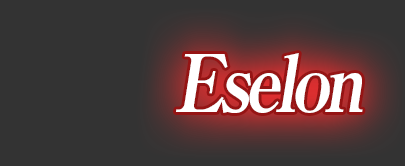
<style>
.page{position:relative;width:405px;height:166px;background:#333333}
.page>*{position:absolute;margin:0}
.t1{font:80px "RyuminPro-ExBold";letter-spacing:-0.08em;color:#ffffff;font-style:italic;scale:0.9 1}
</style>
<div class="page">
<p class="t1" style="left:176px;top:53px;width:187px;height:60px">Eselon</p>
</div>
